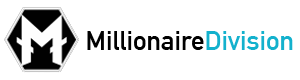
<style>
.page{position:relative;width:300px;height:80px;background:#ffffff}
.page>*{position:absolute;margin:0}
.t1{font:27px "DINAlternate-Bold";color:#000000}
.t2{font:27px "DINAlternate-Bold";color:#13b1cd}
</style>
<div class="page">
<p class="t1" style="left:87px;top:31px;width:206px;height:19px">Millionaire<span class="t2">Division</span></p>
</div>
